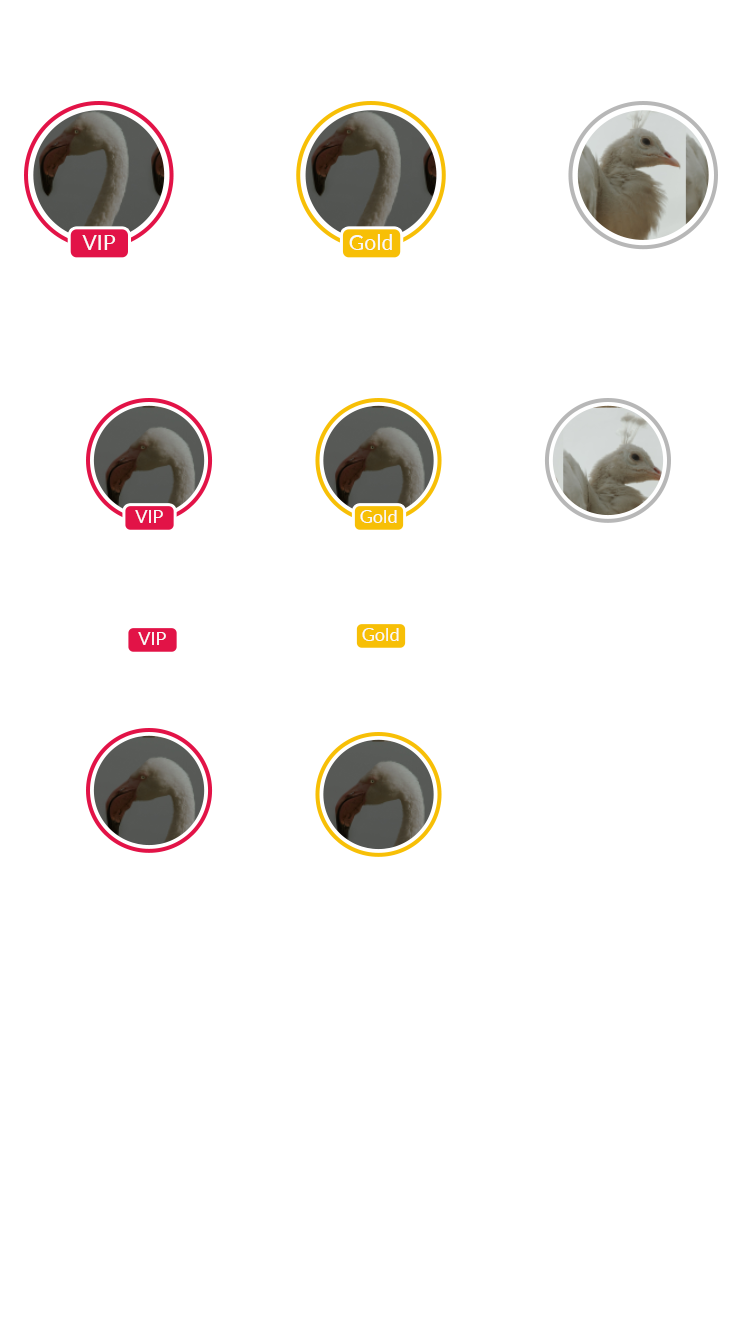
<style>
.page{position:relative;width:750px;height:1344px;background:#ffffff}
.page>*{position:absolute;margin:0}
.t1{font:21px "Lato-Regular";letter-spacing:0.01em;color:#f9f9f9}
.t2{font:17.7px "Lato-Regular";letter-spacing:0.01em;color:#f9f9f9}
</style>
<div class="page">
<p class="t1" style="left:82px;top:235px;width:34px;height:15px">VIP</p>
<p class="t1" style="left:349px;top:234px;width:43px;height:16px">Gold</p>
<p class="t2" style="left:135px;top:510px;width:28px;height:13px">VIP</p>
<p class="t2" style="left:360px;top:510px;width:37px;height:13px">Gold</p>
<p class="t2" style="left:362px;top:628px;width:37px;height:13px">Gold</p>
<p class="t2" style="left:138px;top:632px;width:28px;height:13px">VIP</p>
</div>
